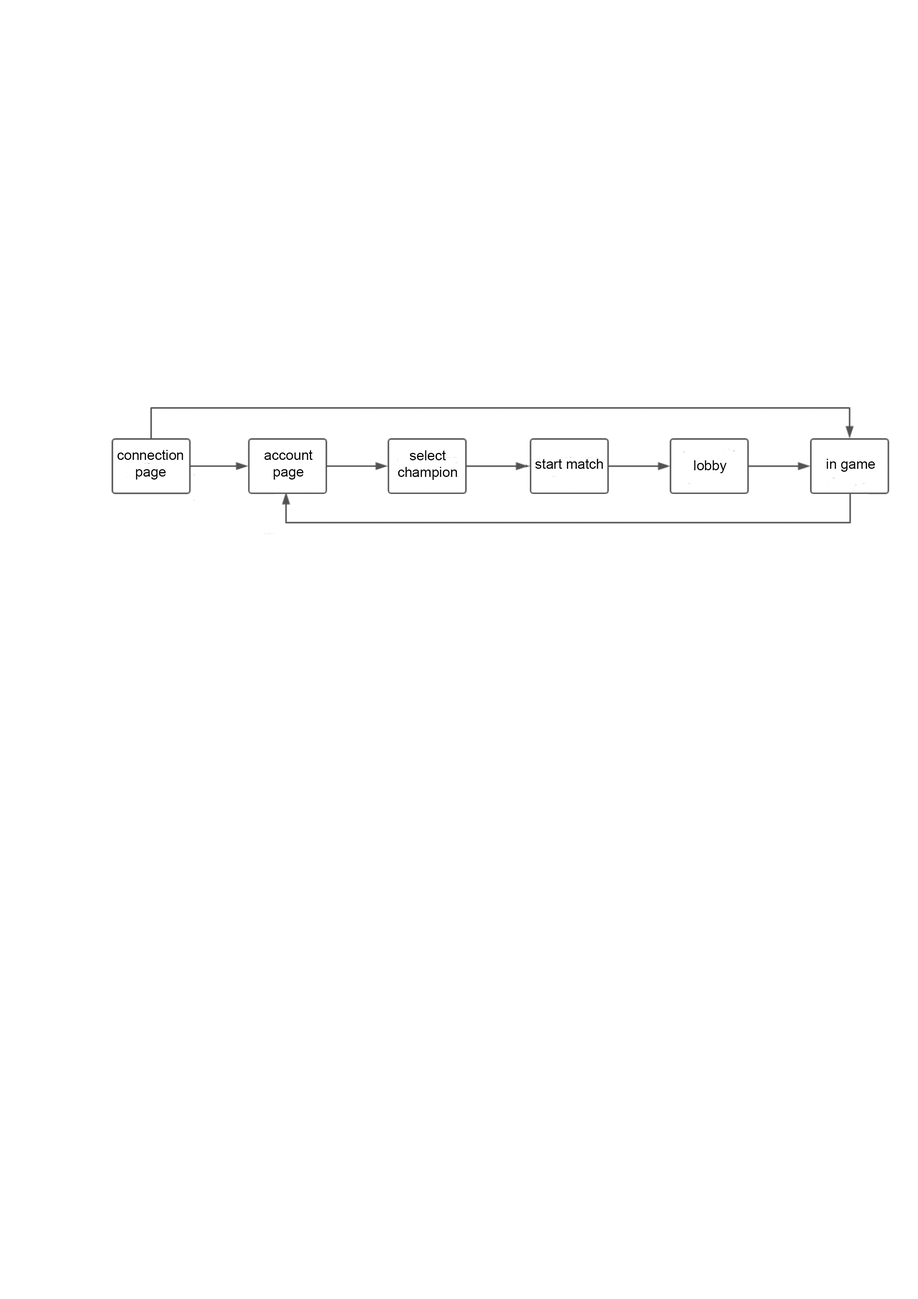
<style>
.page{position:relative;width:918px;height:1299px;background:#ffffff}
.page>*{position:absolute;margin:0}
.t1{font:13.9px "ArialMT";color:#000000}
</style>
<div class="page">
<p class="t1" style="left:117px;top:450px;width:66px;height:29px;text-align:center">connection page</p>
<p class="t1" style="left:264px;top:450px;width:49px;height:29px;text-align:center">account page</p>
<p class="t1" style="left:398px;top:450px;width:59px;height:30px;text-align:center">select champion</p>
<p class="t1" style="left:535px;top:459px;width:68px;height:10px">start match</p>
<p class="t1" style="left:694px;top:460px;width:33px;height:13px">lobby</p>
<p class="t1" style="left:827px;top:459px;width:48px;height:13px">in game</p>
</div>
